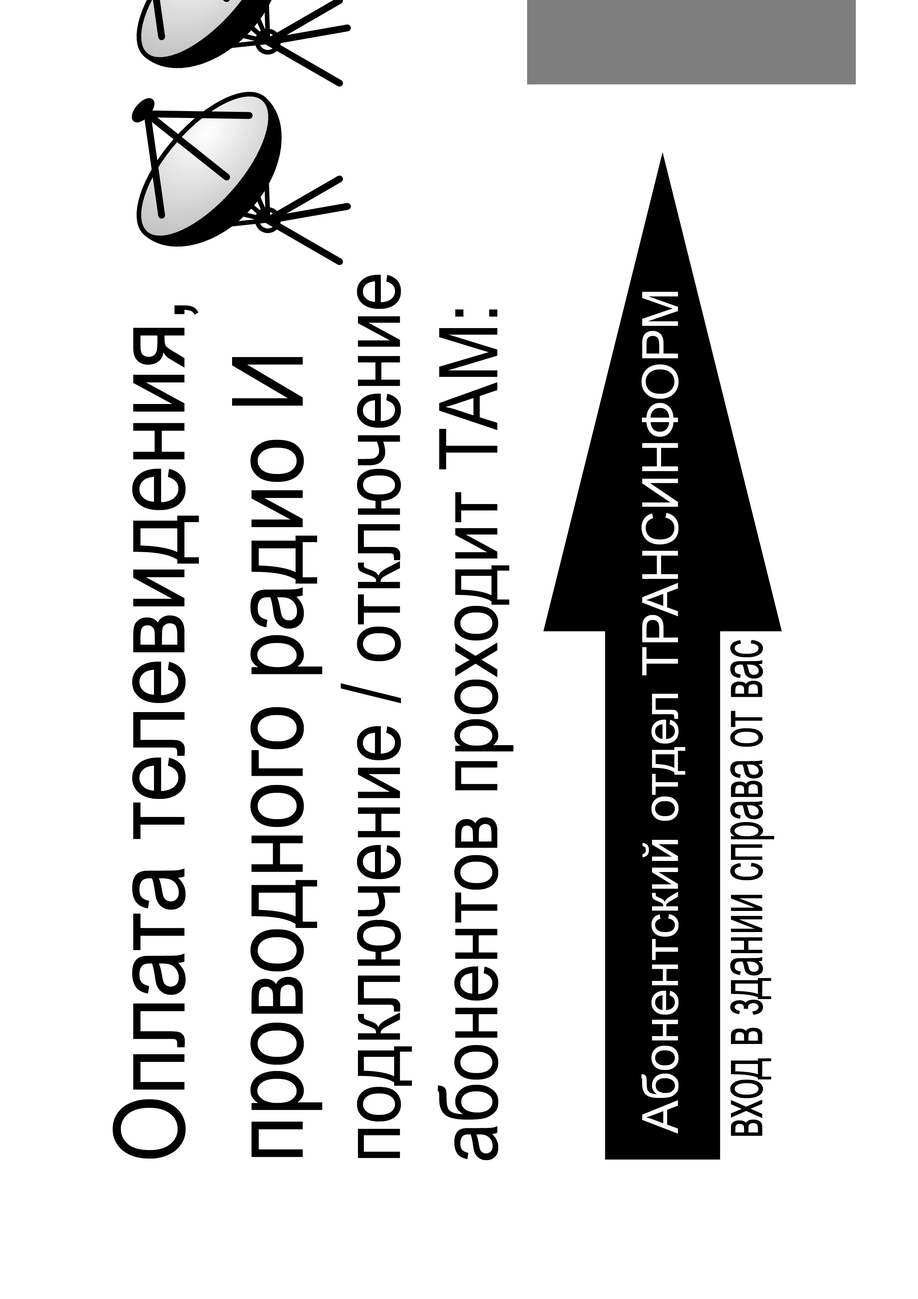
<style>
.page{position:relative;width:918px;height:1299px;background:#ffffff}
.page>*{position:absolute;margin:0}
.t1{font:81.1px "ArialMT";color:#000000;scale:0.88 1}
.t2{font:98.5px "ArialMT";color:#000000;scale:0.88 1}
.t3{font:49.9px "ArialMT";color:#ffffff}
.t4{font:60.2px "ArialMT";color:#000000;scale:0.63 1}
</style>
<div class="page">
<p class="t1" style="left:113px;top:275px;width:400px;height:885px;rotate:-90deg"><span class="t2">Оплата телевидения,<br>проводного радио И<br></span>подключение / отключение<br>абонентов проходит ТАМ:</p>
<p class="t3" style="left:642px;top:292px;width:44px;height:842px;rotate:-90deg">Абонентский отдел ТРАНСИНФОРМ</p>
<p class="t4" style="left:730px;top:640px;width:45px;height:496px;rotate:-90deg">вход в здании справа от вас</p>
</div>
